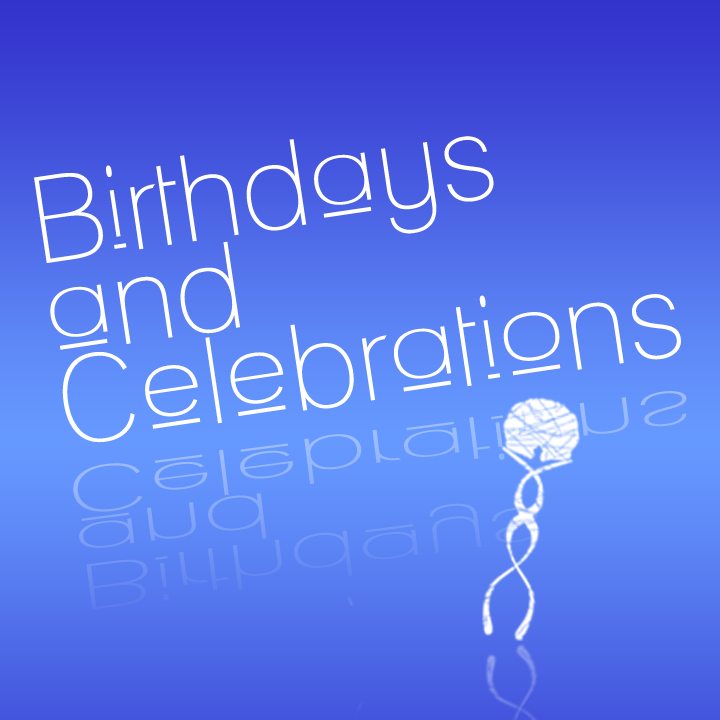
<style>
.page{position:relative;width:720px;height:720px}
.page>*{position:absolute;margin:0}
.t1{font:120px/45.9px "Lane-Upper";color:#ffffff}
</style>
<div class="page">
<p class="t1" style="left:34px;top:136px;width:647px;height:307px;rotate:-8deg">Birthdays <br><br>and<br><br>Celebrations</p>
</div>
